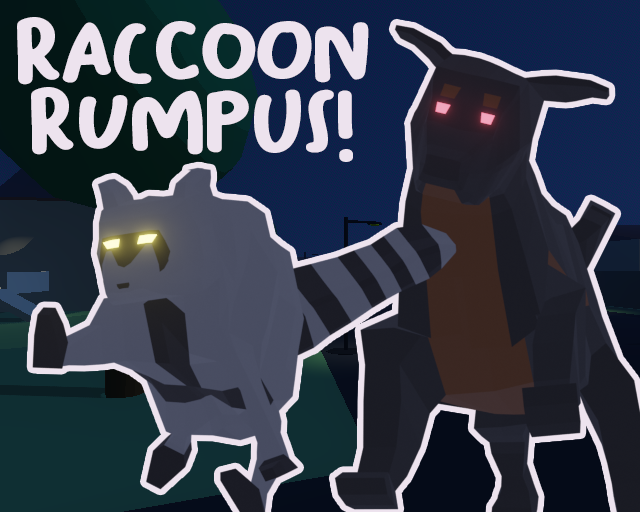
<style>
.page{position:relative;width:640px;height:512px}
.page>*{position:absolute;margin:0}
.t1{font:91.2px/70.7px "BaksoSapi";letter-spacing:-0.1em;color:#ede3ee}
</style>
<div class="page">
<p class="t1" style="left:17px;top:17px;width:352px;height:145px;text-align:center">raccoon<br>rumpus!</p>
</div>
